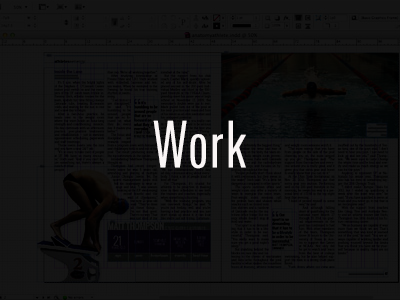
<style>
.page{position:relative;width:400px;height:300px}
.page>*{position:absolute;margin:0}
.t1{font:55px "Oswald-Light";letter-spacing:0.03em;color:#faf6f6;font-weight:bold;scale:0.87 1}
</style>
<div class="page">
<p class="t1" style="left:153px;top:120px;width:93px;height:49px">Work</p>
</div>
